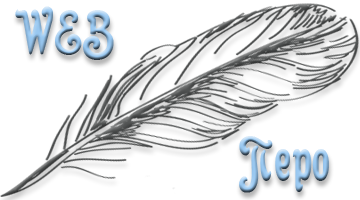
<style>
.page{position:relative;width:360px;height:200px;background:#ffffff}
.page>*{position:absolute;margin:0}
.t1{font:62.5px "AnfisaGrotesk"}
</style>
<div class="page">
<p class="t1" style="left:15px;top:6px;width:99px;height:54px">WEB</p>
<p class="t1" style="left:239px;top:136px;width:90px;height:57px">Перо</p>
</div>
